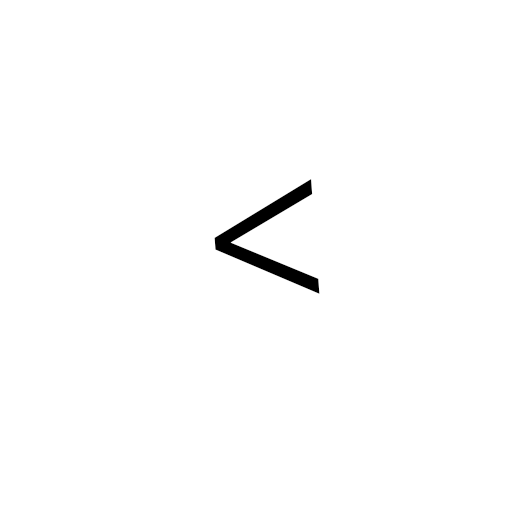
<style>
.page{position:relative;width:512px;height:512px;background:#ffffff}
.page>*{position:absolute;margin:0}
.t1{font:215.9px "MyriadPro-Regular";color:#000000}
</style>
<div class="page">
<p class="t1" style="left:214px;top:179px;width:106px;height:115px;rotate:-4deg">&lt;</p>
</div>
